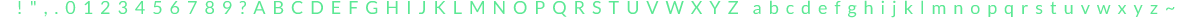
<style>
.page{position:relative;width:1193px;height:18px;background:#ffffff}
.page>*{position:absolute;margin:0}
.t1{font:18px "Lato-Regular";color:#5ce894}
</style>
<div class="page">
<p class="t1" style="left:18px;top:0px;width:1157px;height:18px">!  "  ,  .  0  1  2  3  4  5  6  7  8  9  ?  A  B  C  D  E  F  G  H  I  J  K  L  M  N  O  P  Q  R  S  T  U  V  W  X  Y  Z    a  b  c  d  e  f  g  h  i  j  k  l  m  n  o  p  q  r  s  t  u  v  w  x  y  z  ~</p>
</div>
